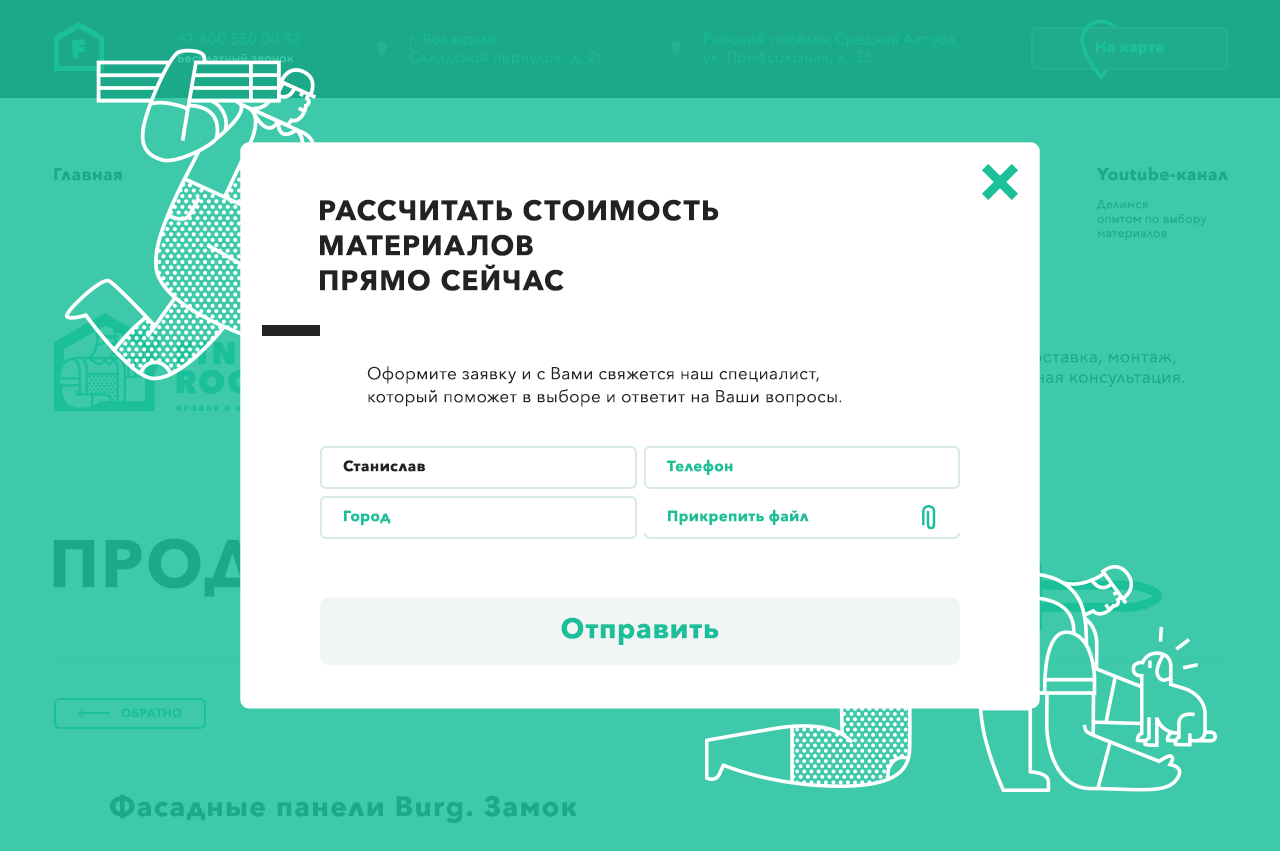
<style>
.page{position:relative;width:1280px;height:851px;background:#3dc9aa}
.page>*{position:absolute;margin:0}
.t1{font:15px "AvenirNext-Regular";letter-spacing:0.025em;color:#17ba95}
.t2{font:15px "AvenirNext-Bold";letter-spacing:0.025em;color:#1bc09b}
.t3{font:28px/35px "AvenirNextCyr-Bold";letter-spacing:0.05em;color:#222222;text-transform:uppercase}
.t4{font:12px "AvenirNext-Regular";letter-spacing:0.025em;color:#1ca989}
.t5{font:17px/23px "AvenirNextCyr-Regular";letter-spacing:0.025em;color:#222222}
.t6{font:15px "AvenirNext-Bold";letter-spacing:0.025em;color:#222222}
.t7{font:28px "AvenirNext-Bold";letter-spacing:0.025em;color:#1bc09b}
.t8{font:12px "AvenirNext-Bold";letter-spacing:0.025em;color:#1bc09b;text-transform:uppercase}
.t9{font:28px "AvenirNext-Bold";letter-spacing:0.05em;color:#1ca889}
</style>
<div class="page">
<p class="t1" style="left:178px;top:33px;width:123px;height:12px">+7 800 550 00 53</p>
<p class="t1" style="left:409px;top:33px;width:194px;height:33px">г. Волжский, <br>Складской переулок, д. 2г</p>
<p class="t1" style="left:703px;top:33px;width:256px;height:33px">Рабочий посёлок Средняя Ахтуба, <br>ул. Профсоюзная, д. 35</p>
<p class="t2" style="left:1096px;top:41px;width:69px;height:15px">На карте</p>
<p class="t3" style="left:320px;top:199px;width:399px;height:92px">рассчитать стоимость <br>материалов <br>прямо сейчас</p>
<p class="t4" style="left:1097px;top:199px;width:110px;height:41px">Делимся<br>опытом по выбору<br>материалов</p>
<p class="t5" style="left:367px;top:366px;width:475px;height:41px">Оформите заявку и с Вами свяжется наш специалист, <br>который поможет в выборе и ответит на Ваши вопросы.</p>
<p class="t6" style="left:343px;top:460px;width:83px;height:12px">Станислав</p>
<p class="t2" style="left:667px;top:459px;width:66px;height:16px">Телефон</p>
<p class="t2" style="left:344px;top:510px;width:47px;height:15px">Город</p>
<p class="t2" style="left:668px;top:509px;width:141px;height:16px">Прикрепить файл</p>
<p class="t7" style="left:561px;top:617px;width:158px;height:28px">Отправить</p>
<p class="t8" style="left:121px;top:708px;width:61px;height:10px">ОБРАТНО</p>
<p class="t9" style="left:110px;top:794px;width:467px;height:29px">Фасадные панели Burg. Замок</p>
</div>
